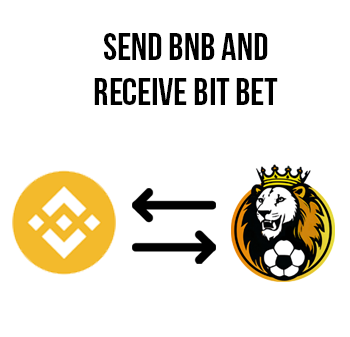
<style>
.page{position:relative;width:350px;height:337px;background:#ffffff}
.page>*{position:absolute;margin:0}
.t1{font:37.8px "BebasNeue";color:#000000}
</style>
<div class="page">
<p class="t1" style="left:94px;top:33px;width:184px;height:72px;text-align:center">SEND BNB AND<br>RECEIVE BIT BET</p>
</div>
